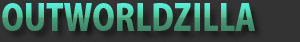
<style>
.page{position:relative;width:300px;height:42px;background:#333333}
.page>*{position:absolute;margin:0}
.t1{font:36px "KozGoPr6N-Heavy";scale:0.88 1}
</style>
<div class="page">
<p class="t1" style="left:2px;top:3px;width:253px;height:28px">OUTWORLDZILLA</p>
</div>
